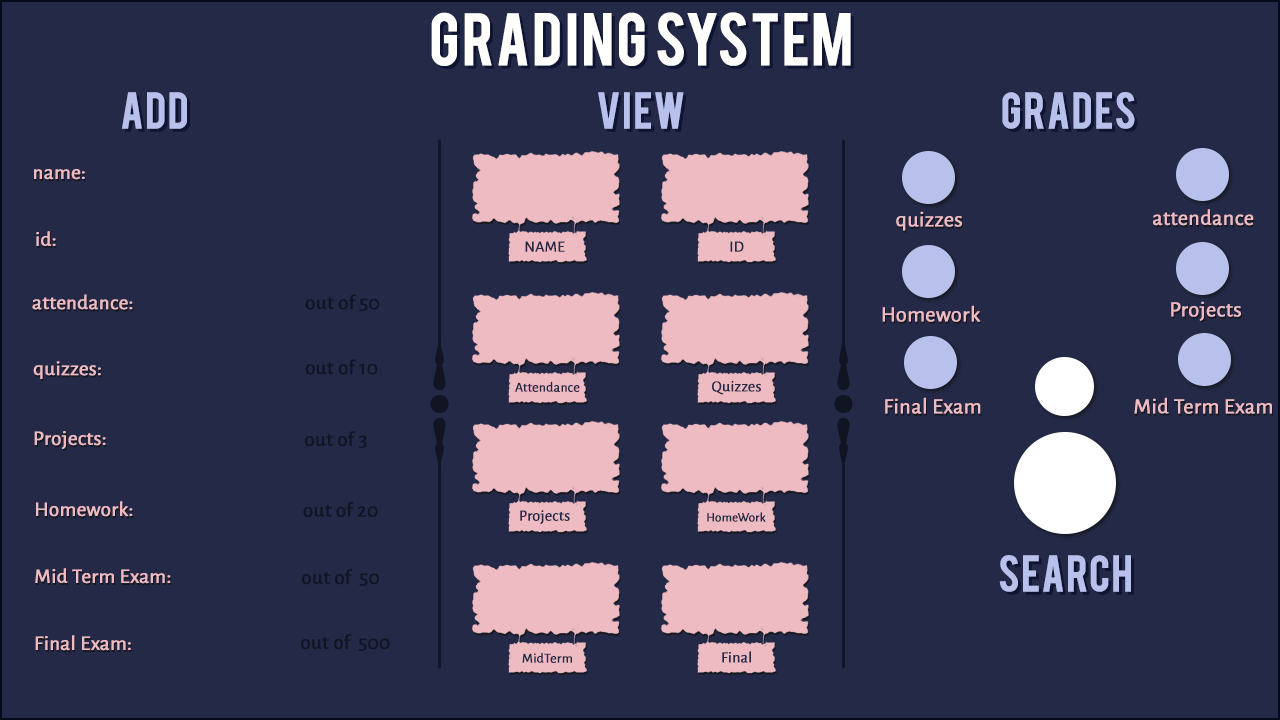
<style>
.page{position:relative;width:1280px;height:720px;background:#232946}
.page>*{position:absolute;margin:0}
.t1{font:58px "Bebas";color:#fffffe;font-weight:bold}
.t2{font:40px "Bebas";color:#b8c1ec;font-weight:bold}
.t3{font:20.8px "AlegreyaSans-Regular";color:#eebbc3;font-weight:bold}
.t4{font:22px "AlegreyaSans-Regular";color:#eebbc3;font-weight:bold}
.t5{font:15.6px "AlegreyaSans-Regular";color:#232946;font-weight:bold}
.t6{font:20.8px "AlegreyaSans-Regular";color:#111422;font-weight:bold}
.t7{font:13.8px "AlegreyaSans-Regular";color:#232946;font-weight:bold}
.t8{font:12.8px "AlegreyaSans-Regular";color:#232946;font-weight:bold}
</style>
<div class="page">
<p class="t1" style="left:431px;top:12px;width:420px;height:54px">Grading System</p>
<p class="t2" style="left:122px;top:92px;width:65px;height:37px">Add</p>
<p class="t2" style="left:598px;top:92px;width:86px;height:37px">View</p>
<p class="t2" style="left:1002px;top:92px;width:133px;height:37px">Grades</p>
<p class="t3" style="left:34px;top:169px;width:51px;height:11px">:name</p>
<p class="t4" style="left:1153px;top:209px;width:101px;height:17px">attendance</p>
<p class="t4" style="left:896px;top:211px;width:66px;height:20px">quizzes</p>
<p class="t3" style="left:36px;top:231px;width:20px;height:15px">:id</p>
<p class="t5" style="left:525px;top:241px;width:40px;height:11px">NAME</p>
<p class="t5" style="left:730px;top:241px;width:14px;height:11px">ID</p>
<p class="t3" style="left:32px;top:294px;width:101px;height:16px">:attendance</p>
<p class="t6" style="left:305px;top:294px;width:74px;height:18px">out of 50</p>
<p class="t4" style="left:882px;top:305px;width:99px;height:17px">Homework</p>
<p class="t4" style="left:1171px;top:301px;width:70px;height:20px">Projects</p>
<p class="t3" style="left:33px;top:361px;width:68px;height:18px">:quizzes</p>
<p class="t6" style="left:305px;top:359px;width:73px;height:16px">out of 10</p>
<p class="t7" style="left:515px;top:381px;width:65px;height:11px">Attendance</p>
<p class="t5" style="left:712px;top:381px;width:49px;height:14px">Quizzes</p>
<p class="t4" style="left:885px;top:397px;width:96px;height:17px">Final Exam</p>
<p class="t4" style="left:1134px;top:397px;width:138px;height:17px">Mid Term Exam</p>
<p class="t3" style="left:34px;top:431px;width:72px;height:18px">:Projects</p>
<p class="t6" style="left:305px;top:431px;width:62px;height:17px">out of 3</p>
<p class="t3" style="left:36px;top:501px;width:97px;height:16px">:Homework</p>
<p class="t6" style="left:303px;top:502px;width:75px;height:15px">out of 20</p>
<p class="t5" style="left:520px;top:510px;width:50px;height:14px">Projects</p>
<p class="t8" style="left:707px;top:512px;width:59px;height:10px">HomeWork</p>
<p class="t2" style="left:999px;top:555px;width:132px;height:37px">Search</p>
<p class="t3" style="left:35px;top:568px;width:136px;height:16px">:Mid Term Exam</p>
<p class="t6" style="left:302px;top:569px;width:77px;height:17px">out of  50</p>
<p class="t3" style="left:35px;top:635px;width:96px;height:16px">:Final Exam</p>
<p class="t6" style="left:301px;top:634px;width:89px;height:17px">out of  500</p>
<p class="t7" style="left:522px;top:652px;width:50px;height:11px">MidTerm</p>
<p class="t5" style="left:722px;top:651px;width:29px;height:12px">Final</p>
</div>
